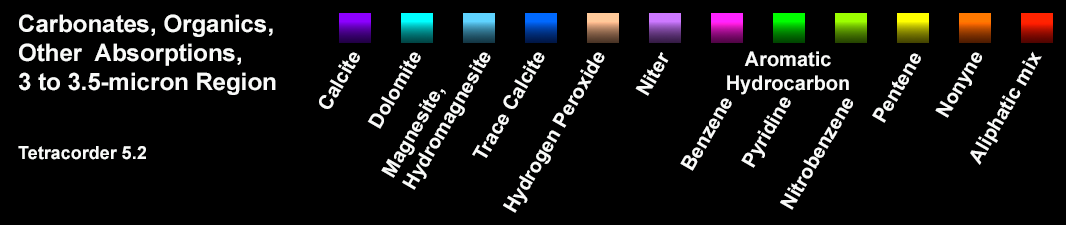
<style>
.page{position:relative;width:1066px;height:225px;background:#000000}
.page>*{position:absolute;margin:0}
.t1{font:24px "Arial-BoldMT";color:#f9faf9}
.t2{font:18px "Arial-BoldMT";color:#f9faf9}
.t3{font:20px "Arial-BoldMT";color:#f9faf9}
</style>
<div class="page">
<p class="t1" style="left:18px;top:14px;width:258px;height:146px">Carbonates, Organics,<br>Other  Absorptions,<br>3 to 3.5-micron Region<br><br><br><br><br><span class="t2">Tetracorder 5.2</span></p>
<p class="t3" style="left:319px;top:52px;width:41px;height:57px;rotate:-60deg">Calcite</p>
<p class="t3" style="left:367px;top:52px;width:54px;height:77px;rotate:-60deg">Dolomite</p>
<p class="t3" style="left:381px;top:52px;width:110px;height:138px;rotate:-60deg">Magnesite,<br>Hydromagnesite</p>
<p class="t3" style="left:472px;top:52px;width:73px;height:106px;rotate:-60deg">Trace Calcite</p>
<p class="t3" style="left:503px;top:52px;width:102px;height:161px;rotate:-60deg">Hydrogen Peroxide</p>
<p class="t3" style="left:635px;top:52px;width:34px;height:44px;rotate:-60deg">Niter</p>
<p class="t3" style="left:727px;top:51px;width:122px;height:44px;text-align:center">Aromatic<br>Hydrocarbon</p>
<p class="t3" style="left:872px;top:53px;width:49px;height:70px;rotate:-60deg">Pentene</p>
<p class="t3" style="left:935px;top:52px;width:47px;height:66px;rotate:-60deg">Nonyne</p>
<p class="t3" style="left:970px;top:51px;width:72px;height:114px;rotate:-60deg">Aliphatic mix</p>
<p class="t3" style="left:680px;top:98px;width:52px;height:73px;rotate:-60deg">Benzene</p>
<p class="t3" style="left:741px;top:97px;width:50px;height:71px;rotate:-60deg">Pyridine</p>
<p class="t3" style="left:780px;top:98px;width:73px;height:112px;rotate:-60deg">Nitrobenzene</p>
</div>
